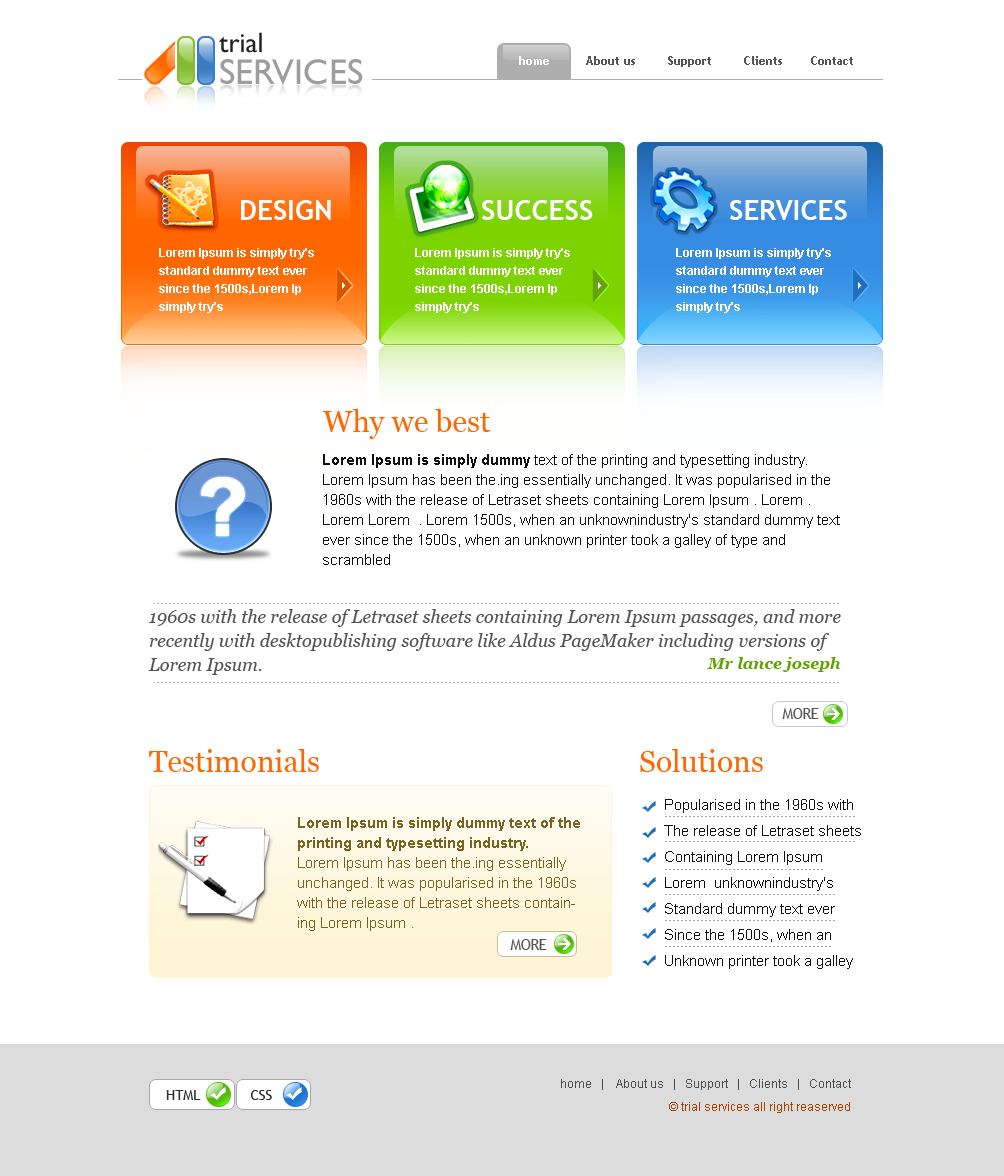
<style>
.page{position:relative;width:1004px;height:1176px;background:#ffffff}
.page>*{position:absolute;margin:0}
.t1{font:36px/16px "GillSans";color:#9d9d9d}
.t2{font:28px/16px "GillSans";color:#222222}
.t3{font:12px "TrebuchetMS-Bold";color:#555555}
.t4{font:12px "TrebuchetMS-Bold";color:#ffffff}
.t5{font:28px "TrebuchetMS-Bold";color:#ffffff;text-transform:uppercase}
.t6{font:12px/18px "Arial-BoldMT";color:#ffffff}
.t7{font:14px/18px "TrebuchetMS";color:#ffffff}
.t8{font:30px "Georgia";color:#ff6600}
.t9{font:15px/20px "ArialMT";color:#0f0f0f}
.t10{font:15px/20px "Arial-BoldMT";color:#0f0f0f}
.t11{font:18px/24px "Georgia-Italic";color:#535353}
.t12{font:16px "Georgia-BoldItalic";color:#5fa300}
.t13{font:15px "TrebuchetMS";letter-spacing:-0.025em;color:#555555;text-transform:uppercase}
.t14{font:15px/26px "ArialMT";color:#0f0f0f}
.t15{font:15px/20px "ArialMT";color:#786321}
.t16{font:15px/20px "Arial-BoldMT";color:#786321}
.t17{font:12px "ArialMT";color:#4c4c4c}
.t18{font:14px "TrebuchetMS";color:#2f2f2f;text-transform:uppercase}
.t19{font:12px "ArialMT";color:#a64200}
</style>
<div class="page">
<p class="t1" style="left:219px;top:32px;width:144px;height:53px"><span class="t2">trial <br><br></span>SERVICES</p>
<p class="t3" style="left:519px;top:56px;width:334px;height:11px"><span class="t4">home         </span>About us        Support        Clients       Contact</p>
<p class="t5" style="left:241px;top:200px;width:90px;height:20px">Design</p>
<p class="t5" style="left:482px;top:200px;width:111px;height:20px">success</p>
<p class="t5" style="left:730px;top:200px;width:117px;height:20px">services</p>
<p class="t6" style="left:159px;top:248px;width:155px;height:65px"><span class="t7"><br></span>Lorem Ipsum is simply try's standard dummy text ever <br>since the 1500s,Lorem Ip<br>simply try's</p>
<p class="t6" style="left:415px;top:248px;width:155px;height:65px"><span class="t7"><br></span>Lorem Ipsum is simply try's standard dummy text ever <br>since the 1500s,Lorem Ip<br>simply try's</p>
<p class="t6" style="left:676px;top:248px;width:155px;height:65px"><span class="t7"><br></span>Lorem Ipsum is simply try's standard dummy text ever <br>since the 1500s,Lorem Ip<br>simply try's</p>
<p class="t8" style="left:322px;top:409px;width:168px;height:30px">Why we best</p>
<p class="t9" style="left:323px;top:454px;width:517px;height:111px"><span class="t10">Lorem Ipsum is simply dummy</span> text of the printing and typesetting industry. Lorem Ipsum has been the.ing essentially unchanged. It was popularised in the 1960s with the release of Letraset sheets containing Lorem Ipsum . Lorem . Lorem Lorem  . Lorem 1500s, when an unknownindustry's standard dummy text ever since the 1500s, when an unknown printer took a galley of type and scrambled</p>
<p class="t11" style="left:148px;top:609px;width:693px;height:66px">1960s with the release of Letraset sheets containing Lorem Ipsum passages, and more recently with desktopublishing software like Aldus PageMaker including versions of Lorem Ipsum.</p>
<p class="t12" style="left:707px;top:657px;width:134px;height:15px">Mr lance joseph</p>
<p class="t13" style="left:782px;top:708px;width:37px;height:11px">more</p>
<p class="t8" style="left:149px;top:749px;width:170px;height:23px">Testimonials</p>
<p class="t8" style="left:640px;top:749px;width:123px;height:23px">Solutions</p>
<p class="t14" style="left:664px;top:799px;width:197px;height:170px">Popularised in the 1960s with The release of Letraset sheets Containing Lorem Ipsum Lorem  unknownindustry's Standard dummy text ever Since the 1500s, when an Unknown printer took a galley</p>
<p class="t15" style="left:297px;top:817px;width:283px;height:114px"><span class="t16">Lorem Ipsum is simply dummy text of the printing and typesetting industry.</span> <br>Lorem Ipsum has been the.ing essentially unchanged. It was popularised in the 1960s with the release of Letraset sheets containing Lorem Ipsum .</p>
<p class="t13" style="left:510px;top:939px;width:37px;height:11px">more</p>
<p class="t17" style="left:561px;top:1079px;width:290px;height:11px">home   |    About us   |   Support   |   Clients   |   Contact</p>
<p class="t18" style="left:166px;top:1090px;width:35px;height:10px">html</p>
<p class="t18" style="left:251px;top:1090px;width:21px;height:10px">css</p>
<p class="t19" style="left:669px;top:1102px;width:181px;height:11px">© trial services all right reaserved</p>
</div>
